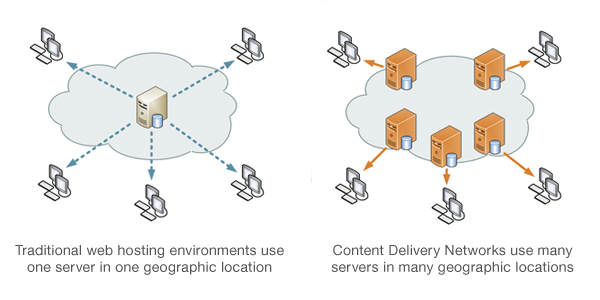
<style>
.page{position:relative;width:600px;height:300px;background:#ffffff}
.page>*{position:absolute;margin:0}
.t1{font:14px "HelveticaNeue";letter-spacing:0.02em;color:#555555}
</style>
<div class="page">
<p class="t1" style="left:15px;top:245px;width:269px;height:30px;text-align:center">Traditional web hosting environments use one server in one geographic location</p>
<p class="t1" style="left:331px;top:244px;width:243px;height:31px;text-align:center">Content Delivery Networks use many servers in many geographic locations</p>
</div>
